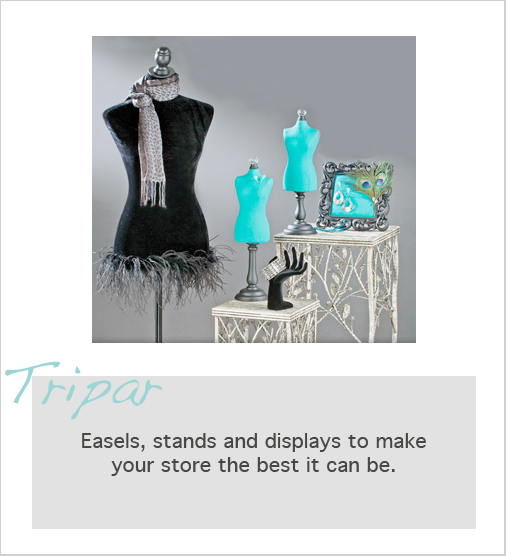
<style>
.page{position:relative;width:506px;height:556px;background:#ffffff}
.page>*{position:absolute;margin:0}
.t1{font:56px "Handwriting-Dakota";color:#9bd5d5}
.t2{font:20px "Geneva";color:#484743}
</style>
<div class="page">
<p class="t1" style="left:5px;top:361px;width:158px;height:59px">Tripar</p>
<p class="t2" style="left:82px;top:433px;width:344px;height:43px;text-align:center">Easels, stands and displays to make your store the best it can be.</p>
</div>
